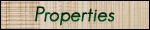
<style>
.page{position:relative;width:150px;height:30px}
.page>*{position:absolute;margin:0}
.t1{font:20px "GeosansLight-Oblique";font-weight:bold}
</style>
<div class="page">
<p class="t1" style="left:35px;top:6px;width:80px;height:20px">Properties</p>
</div>
